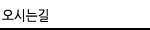
<style>
.page{position:relative;width:150px;height:30px;background:#ffffff}
.page>*{position:absolute;margin:0}
.t1{font:14px "NanumGothic";color:#000000;scale:0.9 1}
</style>
<div class="page">
<p class="t1" style="left:2px;top:9px;width:46px;height:13px">오시는길</p>
</div>
